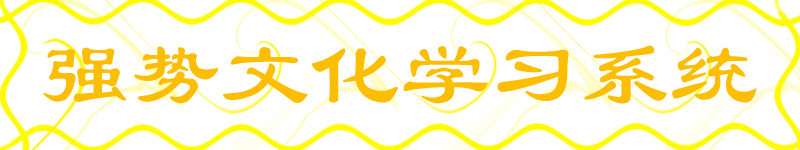
<style>
.page{position:relative;width:800px;height:150px;background:#ffffff}
.page>*{position:absolute;margin:0}
.t1{font:90px "LiSu";color:#fcbe03}
</style>
<div class="page">
<p class="t1" style="left:43px;top:45px;width:714px;height:59px">强势文化学习系统</p>
</div>
